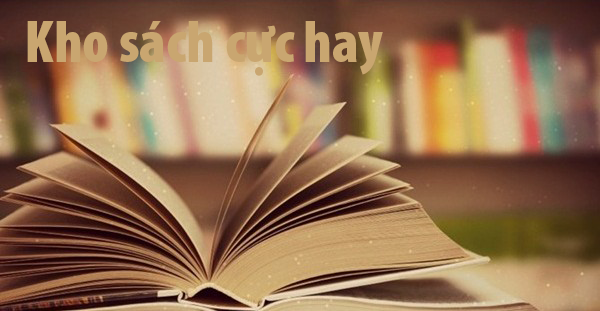
<style>
.page{position:relative;width:600px;height:311px}
.page>*{position:absolute;margin:0}
.t1{font:60px "MyriadPro-BlackCond";color:#c9a670}
</style>
<div class="page">
<p class="t1" style="left:27px;top:21px;width:356px;height:55px">Kho sách cực hay</p>
</div>
